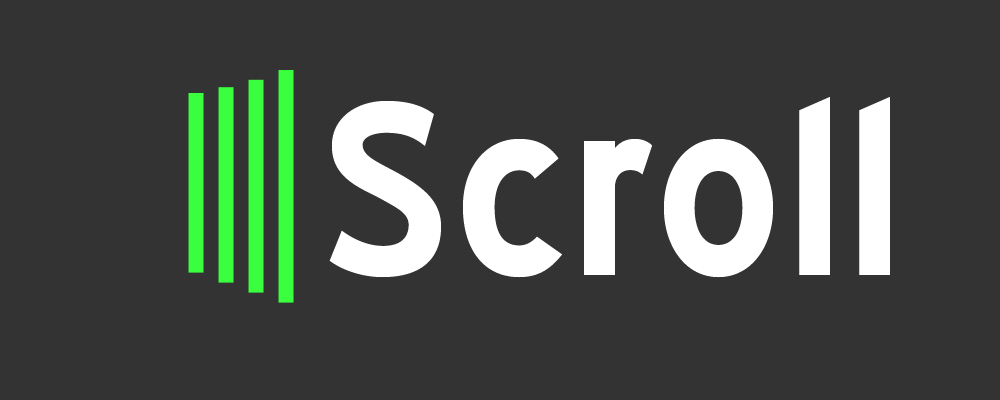
<style>
.page{position:relative;width:1000px;height:400px;background:#333333}
.page>*{position:absolute;margin:0}
.t1{font:240px "BlueHighway-Bold";color:#ffffff}
</style>
<div class="page">
<p class="t1" style="left:329px;top:97px;width:561px;height:181px">Scroll</p>
</div>
